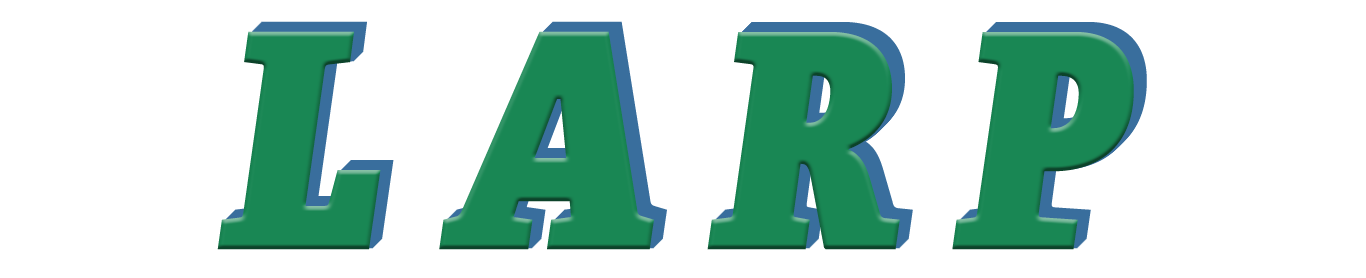
<style>
.page{position:relative;width:1366px;height:278px;background:#ffffff}
.page>*{position:absolute;margin:0}
.t1{font:300px "AdelleCondensed-HeavyItalic";letter-spacing:0.2em;color:#198754}
</style>
<div class="page">
<p class="t1" style="left:221px;top:30px;width:917px;height:219px">LARP</p>
<p class="t1" style="left:222px;top:29px;width:917px;height:219px">LARP</p>
<p class="t1" style="left:223px;top:28px;width:917px;height:219px">LARP</p>
<p class="t1" style="left:224px;top:27px;width:917px;height:219px">LARP</p>
<p class="t1" style="left:225px;top:26px;width:917px;height:219px">LARP</p>
<p class="t1" style="left:226px;top:25px;width:917px;height:219px">LARP</p>
<p class="t1" style="left:227px;top:24px;width:917px;height:219px">LARP</p>
<p class="t1" style="left:228px;top:23px;width:917px;height:219px">LARP</p>
<p class="t1" style="left:229px;top:22px;width:917px;height:219px">LARP</p>
<p class="t1" style="left:230px;top:21px;width:917px;height:219px">LARP</p>
<p class="t1" style="left:217px;top:31px;width:917px;height:219px">LARP</p>
</div>
